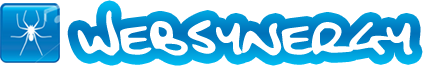
<style>
.page{position:relative;width:423px;height:66px;background:#ffffff}
.page>*{position:absolute;margin:0}
.t1{font:48px "FatboySlimBLTCBRK)";color:#ffffff}
</style>
<div class="page">
<p class="t1" style="left:77px;top:10px;width:336px;height:46px">WebSynergy</p>
</div>
